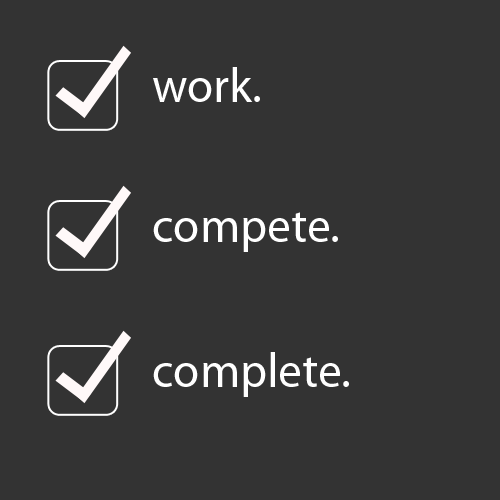
<style>
.page{position:relative;width:500px;height:500px;background:#333333}
.page>*{position:absolute;margin:0}
.t1{font:48px "MyriadPro-Regular";color:#ffffff}
</style>
<div class="page">
<p class="t1" style="left:153px;top:67px;width:107px;height:35px">work.</p>
<p class="t1" style="left:153px;top:212px;width:185px;height:40px">compete.</p>
<p class="t1" style="left:153px;top:352px;width:196px;height:45px">complete.</p>
</div>
